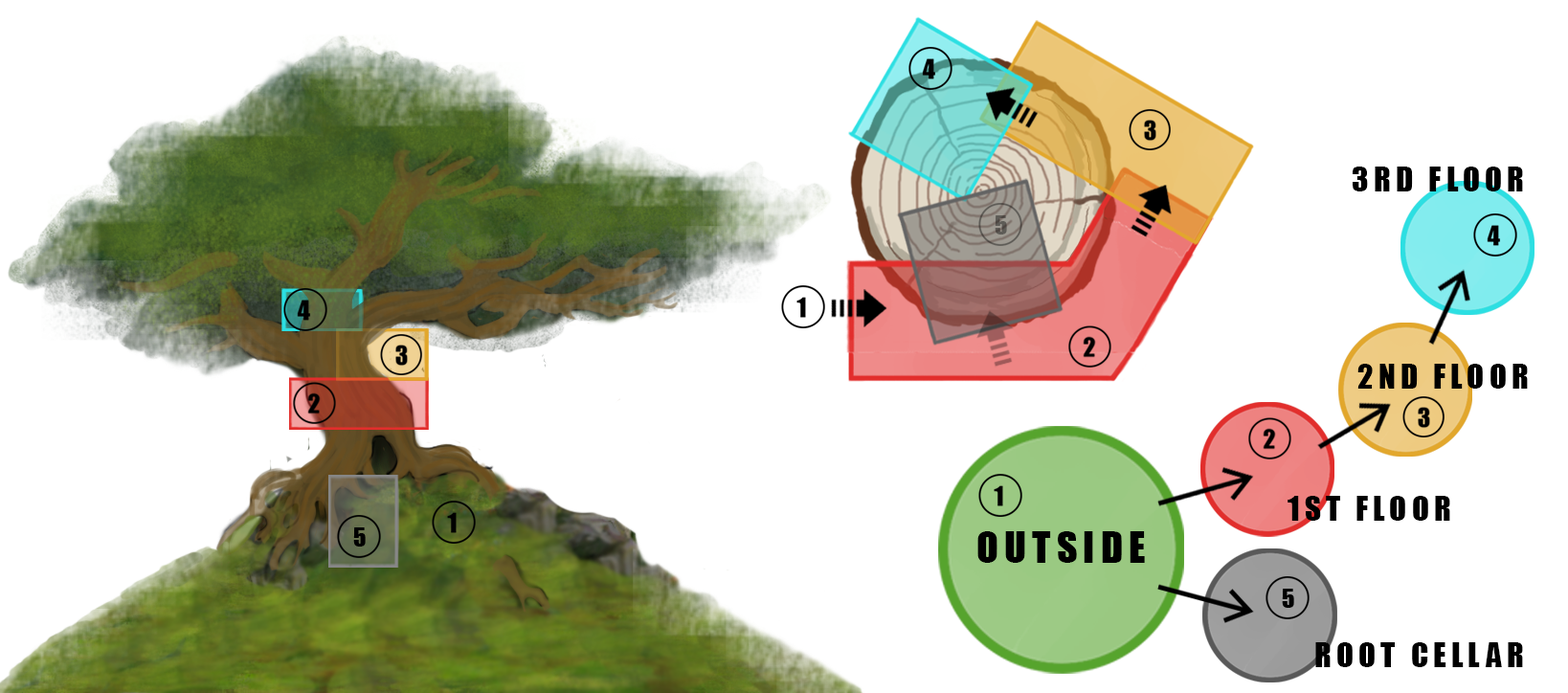
<style>
.page{position:relative;width:1568px;height:693px;background:#ffffff}
.page>*{position:absolute;margin:0}
.t1{font:31.9px "Impact";letter-spacing:0.15em;color:#000000}
.t2{font:39.9px "Impact";letter-spacing:0.15em;color:#000000}
</style>
<div class="page">
<p class="t1" style="left:1353px;top:167px;width:170px;height:24px">3RD FLOOR</p>
<p class="t1" style="left:1357px;top:364px;width:171px;height:25px">2ND FLOOR</p>
<p class="t1" style="left:1288px;top:496px;width:162px;height:25px">1ST FLOOR</p>
<p class="t2" style="left:977px;top:531px;width:168px;height:32px">OUTSIDE</p>
<p class="t1" style="left:1315px;top:642px;width:208px;height:25px">ROOT CELLAR</p>
</div>
